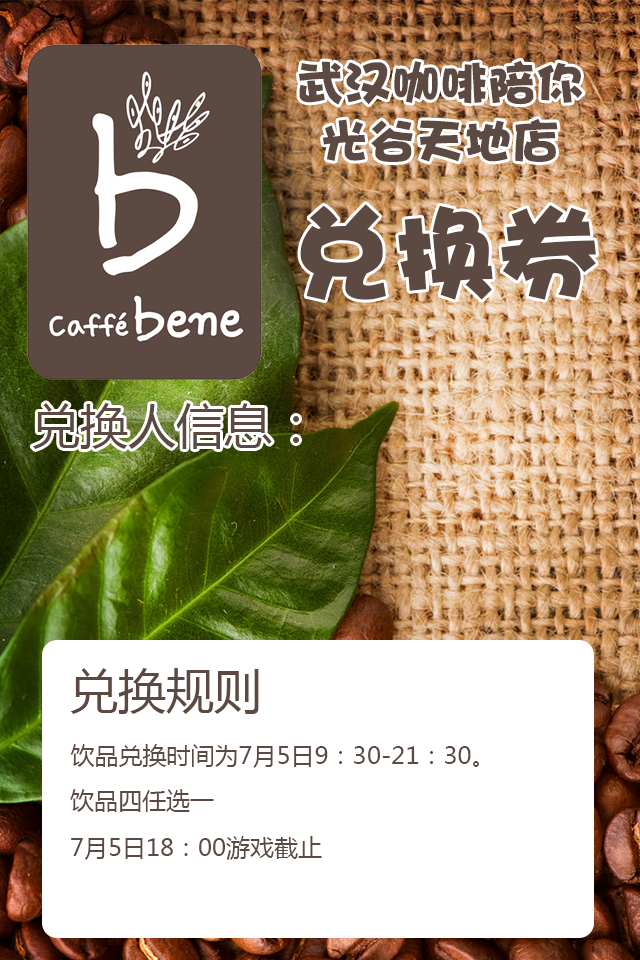
<style>
.page{position:relative;width:640px;height:960px;background:#ffffff}
.page>*{position:absolute;margin:0}
.t1{font:48px "DFPHaiBaoW12";color:#5c4942}
.t2{font:103px "DFPHaiBaoW12";color:#5c4942}
.t3{font:48px "MicrosoftYaHei";color:#5c4942}
.t4{font:24px "MicrosoftYaHei";color:#5c4942}
</style>
<div class="page">
<p class="t1" style="left:299px;top:60px;width:284px;height:102px;text-align:center">武汉咖啡陪你<br>光谷天地店</p>
<p class="t2" style="left:300px;top:204px;width:296px;height:97px">兑换券</p>
<p class="t3" style="left:32px;top:403px;width:267px;height:46px">兑换人信息：</p>
<p class="t3" style="left:70px;top:668px;width:189px;height:46px">兑换规则</p>
<p class="t4" style="left:70px;top:744px;width:409px;height:24px">饮品兑换时间为7月5日9：30-21：30。</p>
<p class="t4" style="left:70px;top:789px;width:144px;height:23px">饮品四任选一</p>
<p class="t4" style="left:71px;top:836px;width:251px;height:24px">7月5日18：00游戏截止</p>
</div>
